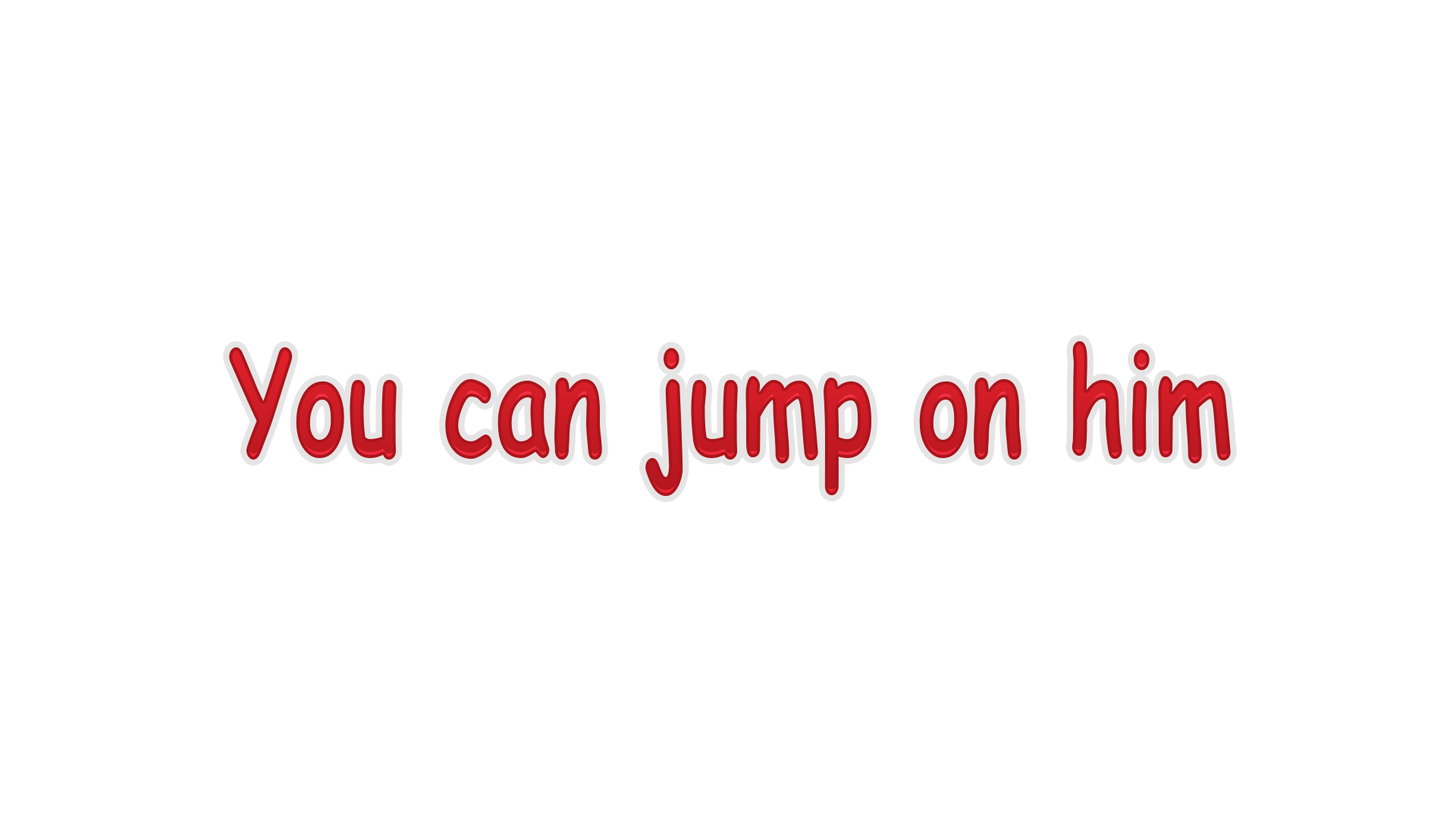
<style>
.page{position:relative;width:1456px;height:819px;background:#ffffff}
.page>*{position:absolute;margin:0}
.t1{font:144.1px "ComicSansMS-Bold";scale:0.7 1}
</style>
<div class="page">
<p class="t1" style="left:229px;top:341px;width:1002px;height:155px">You can jump on him</p>
</div>
